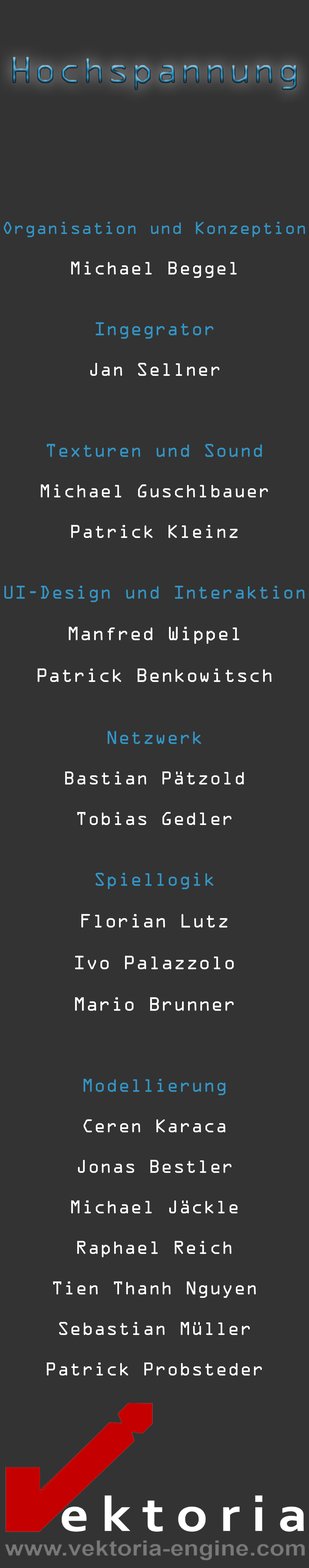
<style>
.page{position:relative;width:309px;height:1568px;background:#333333}
.page>*{position:absolute;margin:0}
.t1{font:33.8px "OCRAStd"}
.t2{font:16.9px "OCRAStd";color:#ffffff}
.t3{font:16.9px "OCRAStd";color:#3394c4}
.t4{font:15.7px "OCRAStd";color:#3394c4}
.t5{font:17.4px "OCRAStd";color:#ffffff}
</style>
<div class="page">
<p class="t1" style="left:13px;top:57px;width:283px;height:33px">Hochspannung</p>
<p class="t2" style="left:4px;top:222px;width:301px;height:1153px"><span class="t3"><br><br><br><br><br><br><br><br><br><br></span><span class="t4">Organisation und Konzeption<br></span><br>Michael Beggel<br><br><br><span class="t3">Ingegrator<br></span><br>Jan Sellner<br><br><br><br><span class="t3">Texturen und Sound<br></span><br>Michael Guschlbauer<br><br>Patrick Kleinz<br><br><br><span class="t3">UI-Design und Interaktion<br></span><span class="t5"><br>Manfred Wippel<br><br>Patrick Benkowitsch<br><br><br></span><span class="t3">Netzwerk<br></span><br>Bastian Pätzold<br><br>Tobias Gedler<br><br><br><span class="t3">Spiellogik<br></span><span class="t5"><br>Florian Lutz<br><br>Ivo Palazzolo<br><br>Mario Brunner<br><br><br><br></span><span class="t3">Modellierung<br></span><br>Ceren Karaca<br><br>Jonas Bestler<br><br>Michael Jäckle<br><br>Raphael Reich<br><br>Tien Thanh Nguyen<br><br>Sebastian Müller<br><br>Patrick Probsteder</p>
</div>
